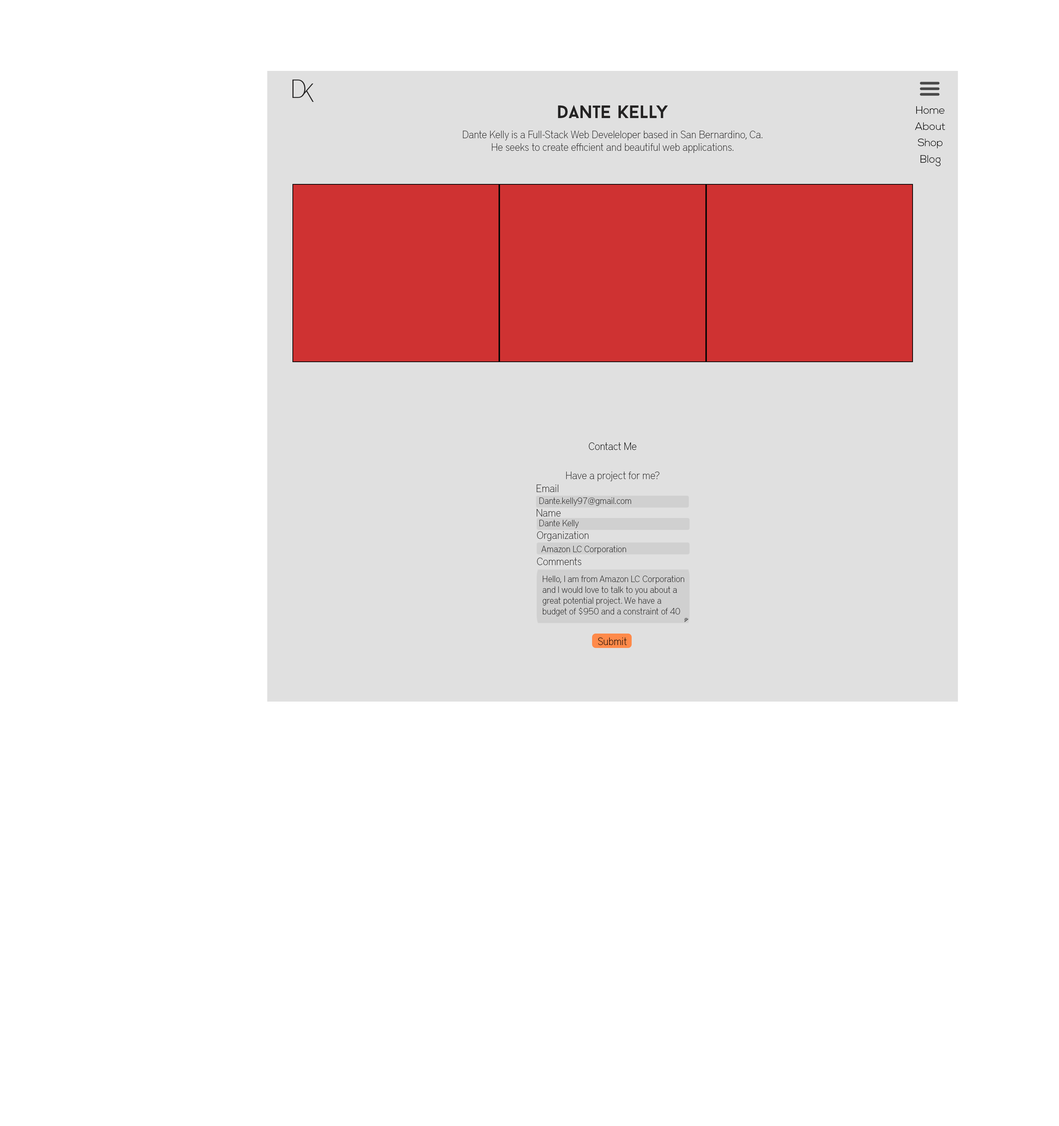
<style>
.page{position:relative;width:1059px;height:1126px;background:#ffffff}
.page>*{position:absolute;margin:0}
.t1{font:10.5px "DistrictPro-Thin";color:#242323}
.t2{font:18px "BaronNeueBold";color:#242323}
.t3{font:10.5px "NexaLight";color:#000000}
.t4{font:10.5px "DistrictPro-Thin";color:#000000}
.t5{font:9px "DistrictPro-Thin";color:#242323}
.t6{font:4.3px "DistrictPro-Thin";color:#242323}
</style>
<div class="page">
<p class="t1" style="left:463px;top:105px;width:300px;height:48px;text-align:center"><span class="t2">Dante Kelly<br></span>Dante Kelly is a Full-Stack Web Develeloper based in San Bernardino, Ca.<br>He seeks to create efficient and beautiful web applications.</p>
<p class="t3" style="left:915px;top:106px;width:31px;height:60px;text-align:center">Home<br>About<br>Shop<br>Blog</p>
<p class="t4" style="left:589px;top:442px;width:48px;height:8px">Contact Me</p>
<p class="t1" style="left:566px;top:471px;width:94px;height:10px">Have a project for me?</p>
<p class="t1" style="left:537px;top:484px;width:21px;height:8px">Email</p>
<p class="t5" style="left:539px;top:497px;width:93px;height:9px">Dante.kelly97@gmail.com</p>
<p class="t1" style="left:537px;top:509px;width:24px;height:7px">Name</p>
<p class="t6" style="left:539px;top:520px;width:40px;height:8px">Dante Kelly</p>
<p class="t1" style="left:537px;top:531px;width:52px;height:10px">Organization</p>
<p class="t6" style="left:542px;top:546px;width:84px;height:8px">Amazon LC Corporation</p>
<p class="t1" style="left:537px;top:557px;width:45px;height:8px">Comments</p>
<p class="t6" style="left:543px;top:575px;width:141px;height:41px">Hello, I am from Amazon LC Corporation<br>and I would love to talk to you about a <br>great potential project. We have a<br>budget of $950 and a constraint of 40</p>
<p class="t4" style="left:598px;top:637px;width:29px;height:8px">Submit</p>
</div>
